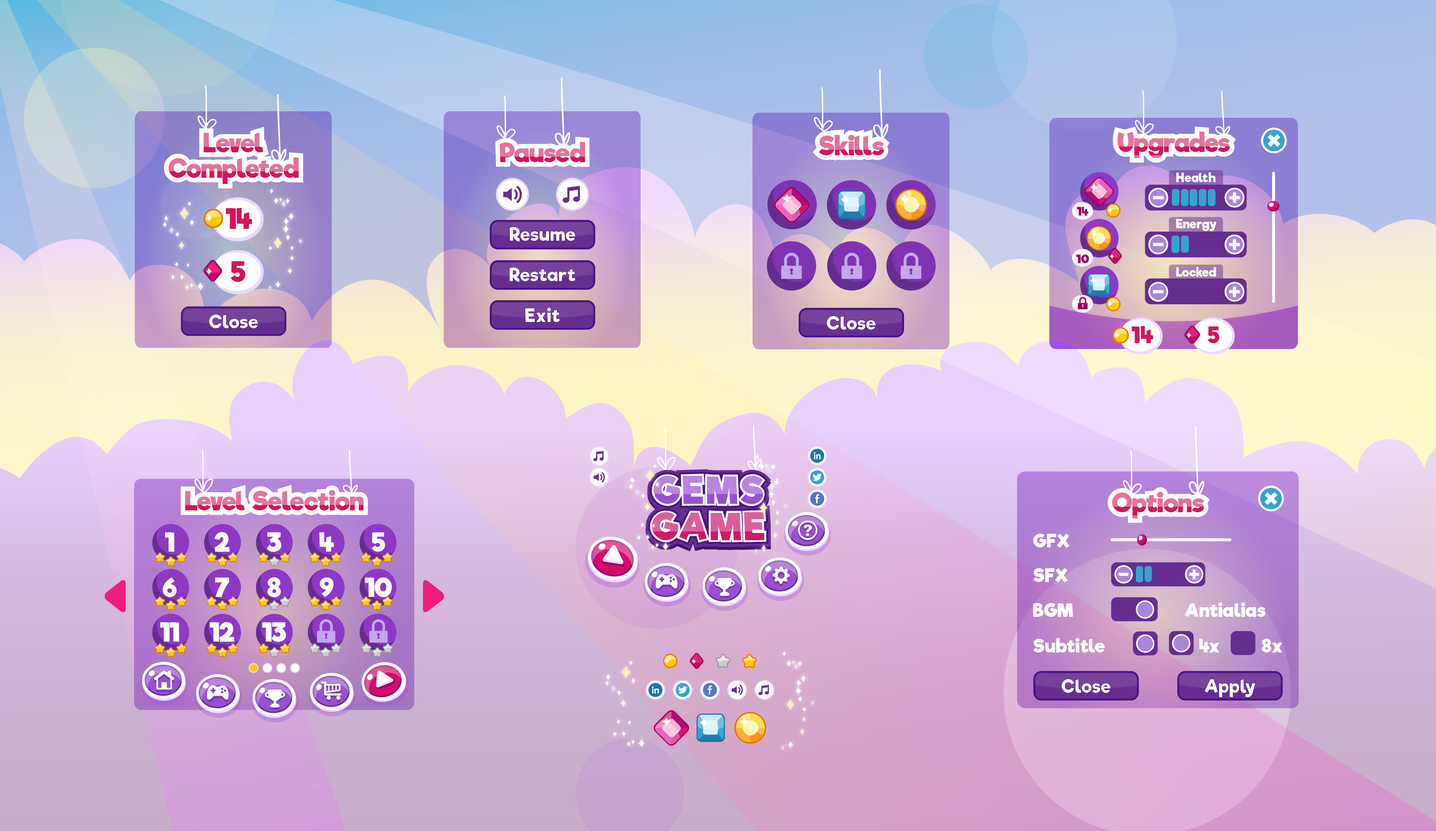
<style>
.page{position:relative;width:1436px;height:831px}
.page>*{position:absolute;margin:0}
.t1{font:25.4px/25.4px "RifficFree-Bold"}
.t2{font:25.4px "RifficFree-Bold"}
.t3{font:12px "RifficFree-Bold";letter-spacing:0.025em;color:#ffffff}
.t4{font:11.6px "RifficFree-Bold";letter-spacing:0.025em;color:#9e005d}
.t5{font:21.8px "RifficFree-Bold";letter-spacing:0.025em;color:#d4145a}
.t6{font:36.3px/36.3px "RifficFree-Bold";letter-spacing:0.075em}
.t7{font:18.2px "RifficFree-Bold";letter-spacing:0.025em;color:#ffffff}
</style>
<div class="page">
<p class="t1" style="left:168px;top:133px;width:131px;height:51px;text-align:center">Level <br>Completed</p>
<p class="t1" style="left:168px;top:133px;width:131px;height:51px;text-align:center">Level <br>Completed</p>
<p class="t2" style="left:819px;top:135px;width:65px;height:20px">Skills</p>
<p class="t2" style="left:819px;top:135px;width:65px;height:20px">Skills</p>
<p class="t2" style="left:1117px;top:131px;width:113px;height:27px">Upgrades</p>
<p class="t2" style="left:1117px;top:131px;width:113px;height:27px">Upgrades</p>
<p class="t2" style="left:500px;top:141px;width:85px;height:21px">Paused</p>
<p class="t2" style="left:500px;top:141px;width:85px;height:21px">Paused</p>
<p class="t3" style="left:1176px;top:172px;width:40px;height:10px">Health</p>
<p class="t4" style="left:1077px;top:207px;width:11px;height:8px">14</p>
<p class="t3" style="left:1176px;top:219px;width:40px;height:12px">Energy</p>
<p class="t4" style="left:1076px;top:254px;width:13px;height:9px">10</p>
<p class="t3" style="left:1176px;top:267px;width:40px;height:9px">Locked</p>
<p class="t5" style="left:1131px;top:326px;width:22px;height:17px">14</p>
<p class="t5" style="left:1208px;top:326px;width:11px;height:17px">5</p>
<p class="t6" style="left:652px;top:476px;width:112px;height:64px;text-align:center">GEMS <br>GAME</p>
<p class="t6" style="left:652px;top:476px;width:112px;height:64px;text-align:center">GEMS <br>GAME</p>
<p class="t2" style="left:185px;top:490px;width:179px;height:20px">Level Selection</p>
<p class="t2" style="left:185px;top:490px;width:179px;height:20px">Level Selection</p>
<p class="t2" style="left:1112px;top:492px;width:92px;height:26px">Options</p>
<p class="t2" style="left:1112px;top:492px;width:92px;height:26px">Options</p>
<p class="t7" style="left:1033px;top:533px;width:37px;height:14px">GFX</p>
<p class="t7" style="left:1033px;top:567px;width:35px;height:15px">SFX</p>
<p class="t7" style="left:1033px;top:603px;width:40px;height:14px">BGM</p>
<p class="t7" style="left:1184px;top:602px;width:81px;height:15px">Antialias</p>
<p class="t7" style="left:1033px;top:638px;width:71px;height:14px">Subtitle</p>
<p class="t7" style="left:1199px;top:638px;width:20px;height:14px">4x</p>
<p class="t7" style="left:1261px;top:638px;width:21px;height:14px">8x</p>
</div>
